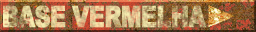
<style>
.page{position:relative;width:256px;height:32px}
.page>*{position:absolute;margin:0}
.t1{font:29.3px "Arial-Black";letter-spacing:-0.04em;text-transform:uppercase;font-weight:bold;scale:0.74 1}
</style>
<div class="page">
<p class="t1" style="left:3px;top:5px;width:203px;height:23px">BASE VERMELHA</p>
</div>
